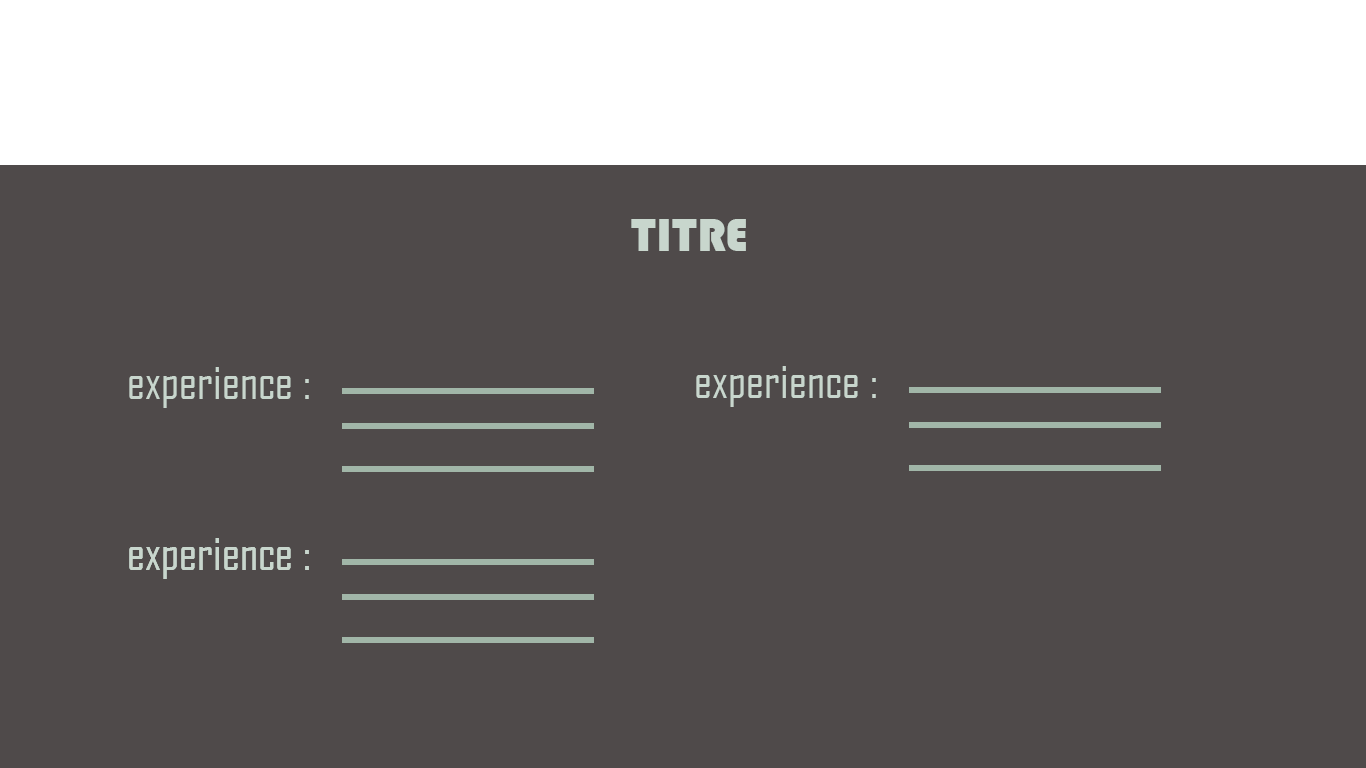
<style>
.page{position:relative;width:1366px;height:768px;background:#4f4a4a}
.page>*{position:absolute;margin:0}
.t1{font:48px "Bauhaus93";color:#c8d6cd}
.t2{font:48px "AgencyFB-Reg";color:#c8d6cd}
</style>
<div class="page">
<p class="t1" style="left:631px;top:219px;width:115px;height:32px">TITRE</p>
<p class="t1" style="left:631px;top:219px;width:115px;height:32px">TITRE</p>
<p class="t2" style="left:696px;top:366px;width:180px;height:41px">experience :</p>
<p class="t2" style="left:129px;top:367px;width:180px;height:41px">experience :</p>
<p class="t2" style="left:129px;top:367px;width:180px;height:41px">experience :</p>
<p class="t2" style="left:129px;top:538px;width:180px;height:41px">experience :</p>
<p class="t2" style="left:129px;top:538px;width:180px;height:41px">experience :</p>
</div>
